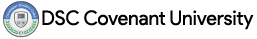
<style>
.page{position:relative;width:257px;height:39px;background:#ffffff}
.page>*{position:absolute;margin:0}
.t1{font:19.8px "ProductSans-Regular";color:#000000}
</style>
<div class="page">
<p class="t1" style="left:42px;top:10px;width:212px;height:20px">DSC Covenant University</p>
</div>
